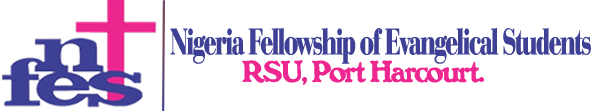
<style>
.page{position:relative;width:600px;height:111px;background:#ffffff}
.page>*{position:absolute;margin:0}
.t1{font:38.5px "BediniBold";letter-spacing:-0.05em;color:#3e4095;scale:0.67 1}
.t2{font:29.1px "BenFranklin";letter-spacing:-0.05em;color:#ed2690}
</style>
<div class="page">
<p class="t1" style="left:170px;top:27px;width:421px;height:37px">Nigeria Fellowship of Evangelical Students</p>
<p class="t2" style="left:242px;top:60px;width:242px;height:25px">RSU, Port Harcourt.</p>
</div>
